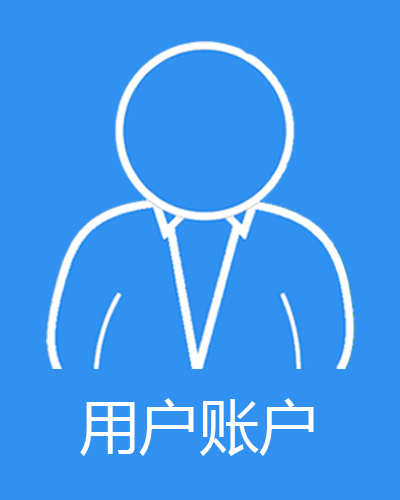
<style>
.page{position:relative;width:400px;height:500px;background:#3191f0}
.page>*{position:absolute;margin:0}
.t1{font:60px "MicrosoftYaHei";color:#ffffff}
</style>
<div class="page">
<p class="t1" style="left:80px;top:398px;width:234px;height:58px">用户账户</p>
</div>
